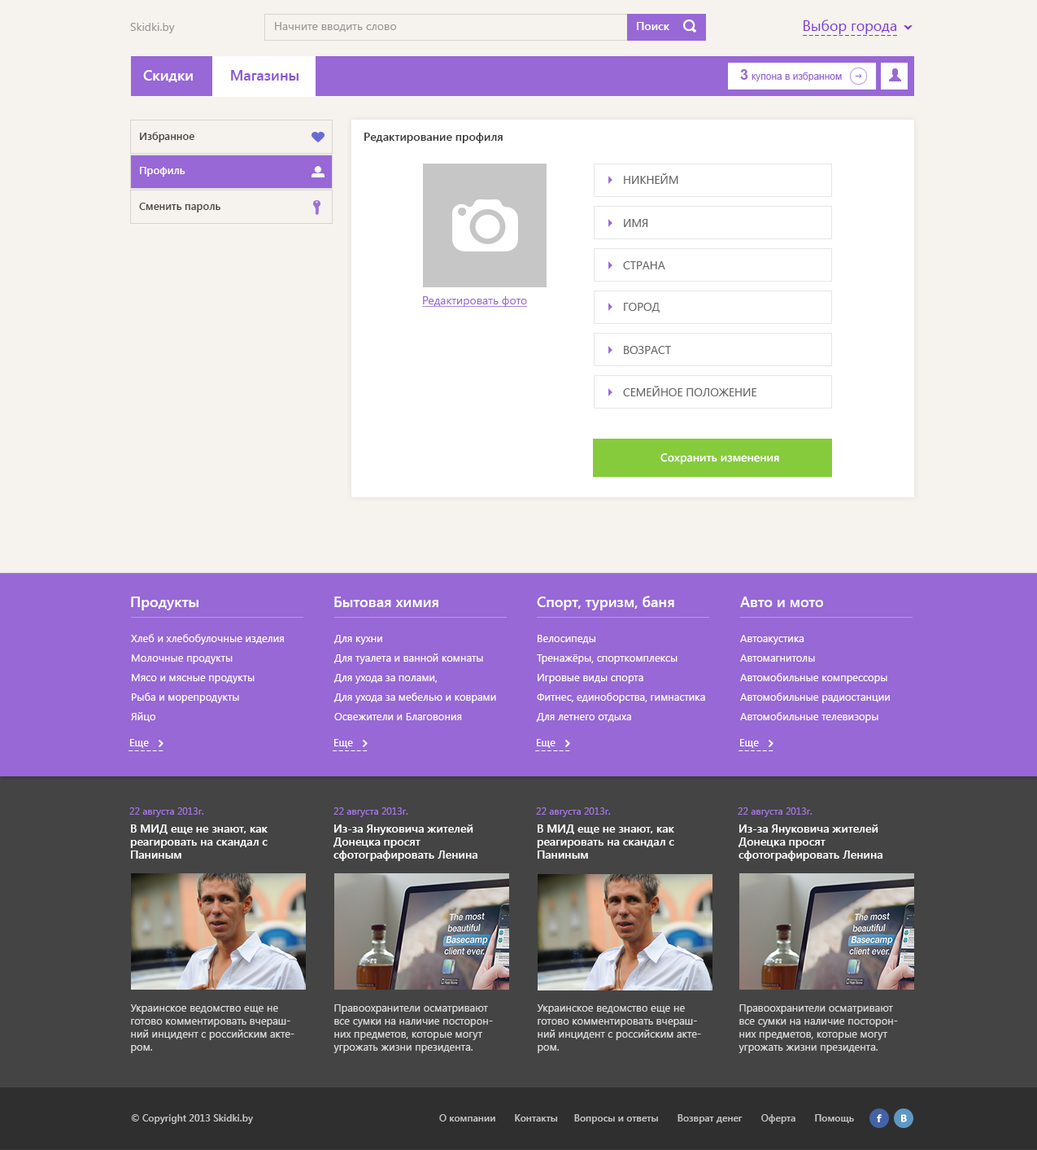
<style>
.page{position:relative;width:1037px;height:1150px;background:#f6f2ed}
.page>*{position:absolute;margin:0}
.t1{font:11.4px "SegoeUI";color:#979797}
.t2{font:11.4px "SegoeUI-SemiBold";color:#ffffff}
.t3{font:14.6px "SegoeUI";color:#7b35d9}
.t4{font:14.6px "SegoeUI";letter-spacing:0.01em;color:#7b35d9}
.t5{font:9.8px "ArialMT";color:#9768d6}
.t6{font:14.6px "Arial-BoldMT";color:#9768d6}
.t7{font:10.6px "SegoeUI-SemiBold";color:#444444}
.t8{font:11.4px "SegoeUI-SemiBold";color:#373737}
.t9{font:10.6px "SegoeUI-SemiBold";color:#ffffff}
.t10{font:11.4px "SegoeUI";color:#656565;text-transform:uppercase}
.t11{font:11.4px "SegoeUI";color:#9768d6;text-decoration:underline}
.t12{font:14.6px "SegoeUI-SemiBold";color:#ffffff}
.t13{font:10.6px/19.5px "SegoeUI";color:#ffffff}
.t14{font:10.6px "SegoeUI";color:#ffffff}
.t15{font:14.6px "SegoeUI";letter-spacing:0.01em;color:#ffffff}
.t16{font:9.8px "SegoeUI";color:#a776e8}
.t17{font:11.4px/13px "SegoeUI-SemiBold";color:#ffffff}
.t18{font:10.6px/13px "SegoeUI";color:#dbdbdb}
.t19{font:9.8px "SegoeUI-SemiBold";color:#c3c3c3}
</style>
<div class="page">
<p class="t1" style="left:130px;top:23px;width:45px;height:10px">Skidki.by</p>
<p class="t1" style="left:275px;top:22px;width:121px;height:10px">Начните вводить слово</p>
<p class="t2" style="left:637px;top:22px;width:33px;height:8px">Поиск</p>
<p class="t3" style="left:804px;top:20px;width:93px;height:14px">Выбор города</p>
<p class="t4" style="left:803px;top:35px;width:94px;height:1px">----------------</p>
<p class="t5" style="left:740px;top:69px;width:102px;height:12px"><span class="t6">3 </span>купона в избранном</p>
<p class="t7" style="left:140px;top:132px;width:54px;height:10px">Избранное</p>
<p class="t8" style="left:364px;top:133px;width:139px;height:10px">Редактирование профиля</p>
<p class="t9" style="left:140px;top:167px;width:45px;height:10px">Профиль</p>
<p class="t10" style="left:624px;top:173px;width:55px;height:11px">Никнейм</p>
<p class="t7" style="left:139px;top:203px;width:81px;height:9px">Сменить пароль</p>
<p class="t10" style="left:624px;top:219px;width:24px;height:8px">имя</p>
<p class="t10" style="left:623px;top:261px;width:42px;height:8px">страна</p>
<p class="t11" style="left:422px;top:296px;width:106px;height:11px">Редактировать фото</p>
<p class="t10" style="left:624px;top:303px;width:36px;height:9px">город</p>
<p class="t10" style="left:624px;top:346px;width:47px;height:8px">возраст</p>
<p class="t10" style="left:623px;top:386px;width:134px;height:10px">семейное положение</p>
<p class="t2" style="left:661px;top:453px;width:118px;height:12px">Cохранить изменения</p>
<p class="t12" style="left:131px;top:596px;width:68px;height:14px">Продукты</p>
<p class="t12" style="left:334px;top:596px;width:105px;height:11px">Бытовая химия</p>
<p class="t12" style="left:537px;top:596px;width:137px;height:14px">Спорт, туризм, баня</p>
<p class="t12" style="left:740px;top:596px;width:84px;height:11px">Авто и мото</p>
<p class="t13" style="left:131px;top:634px;width:153px;height:88px">Хлеб и хлебобулочные изделия<br>Молочные продукты<br>Мясо и мясные продукты<br>Рыба и морепродукты<br>Яйцо</p>
<p class="t13" style="left:334px;top:635px;width:162px;height:85px">Для кухни<br>Для туалета и ванной комнаты<br>Для ухода за полами,<br>Для ухода за мебелью и коврами<br>Освежители и Благовония</p>
<p class="t13" style="left:536px;top:635px;width:169px;height:87px">Велосипеды<br>Тренажёры, спорткомплексы <br>Игровые виды спорта<br>Фитнес, единоборства, гимнастика<br>Для летнего отдыха</p>
<p class="t13" style="left:740px;top:635px;width:150px;height:87px">Автоакустика<br>Автомагнитолы<br>Автомобильные компрессоры<br>Автомобильные радиостанции<br>Автомобильные телевизоры</p>
<p class="t14" style="left:130px;top:739px;width:19px;height:9px">Еще</p>
<p class="t14" style="left:334px;top:739px;width:19px;height:9px">Еще</p>
<p class="t14" style="left:537px;top:739px;width:19px;height:9px">Еще</p>
<p class="t14" style="left:740px;top:739px;width:19px;height:9px">Еще</p>
<p class="t15" style="left:129px;top:750px;width:35px;height:1px">------</p>
<p class="t15" style="left:333px;top:750px;width:35px;height:1px">------</p>
<p class="t15" style="left:535px;top:750px;width:35px;height:1px">------</p>
<p class="t15" style="left:739px;top:750px;width:35px;height:1px">------</p>
<p class="t16" style="left:129px;top:807px;width:75px;height:10px">22 августа 2013г.</p>
<p class="t16" style="left:334px;top:807px;width:74px;height:10px">22 августа 2013г.</p>
<p class="t16" style="left:536px;top:807px;width:75px;height:10px">22 августа 2013г.</p>
<p class="t16" style="left:738px;top:807px;width:75px;height:10px">22 августа 2013г.</p>
<p class="t17" style="left:130px;top:824px;width:138px;height:34px">В МИД еще не знают, как <br>реагировать на скандал с <br>Паниным</p>
<p class="t17" style="left:334px;top:824px;width:144px;height:37px">Из-за Януковича жителей <br>Донецка просят <br>сфотографировать Ленина</p>
<p class="t17" style="left:537px;top:824px;width:137px;height:34px">В МИД еще не знают, как <br>реагировать на скандал с <br>Паниным</p>
<p class="t17" style="left:739px;top:824px;width:144px;height:37px">Из-за Януковича жителей <br>Донецка просят <br>сфотографировать Ленина</p>
<p class="t18" style="left:130px;top:1004px;width:165px;height:49px">Украинское ведомство еще не готово комментировать вчерашний инцидент с российским актером.</p>
<p class="t18" style="left:334px;top:1004px;width:159px;height:49px">Правоохранители осматривают все сумки на наличие посторонних предметов, которые могут угрожать жизни президента.</p>
<p class="t18" style="left:537px;top:1004px;width:164px;height:49px">Украинское ведомство еще не готово комментировать вчерашний инцидент с российским актером.</p>
<p class="t18" style="left:739px;top:1004px;width:159px;height:49px">Правоохранители осматривают все сумки на наличие посторонних предметов, которые могут угрожать жизни президента.</p>
<p class="t19" style="left:131px;top:1114px;width:122px;height:10px">© Copyright 2013 Skidki.by</p>
<p class="t19" style="left:439px;top:1114px;width:415px;height:10px">О компании       Контакты      Вопросы и ответы       Возврат денег       Оферта       Помощь</p>
</div>
